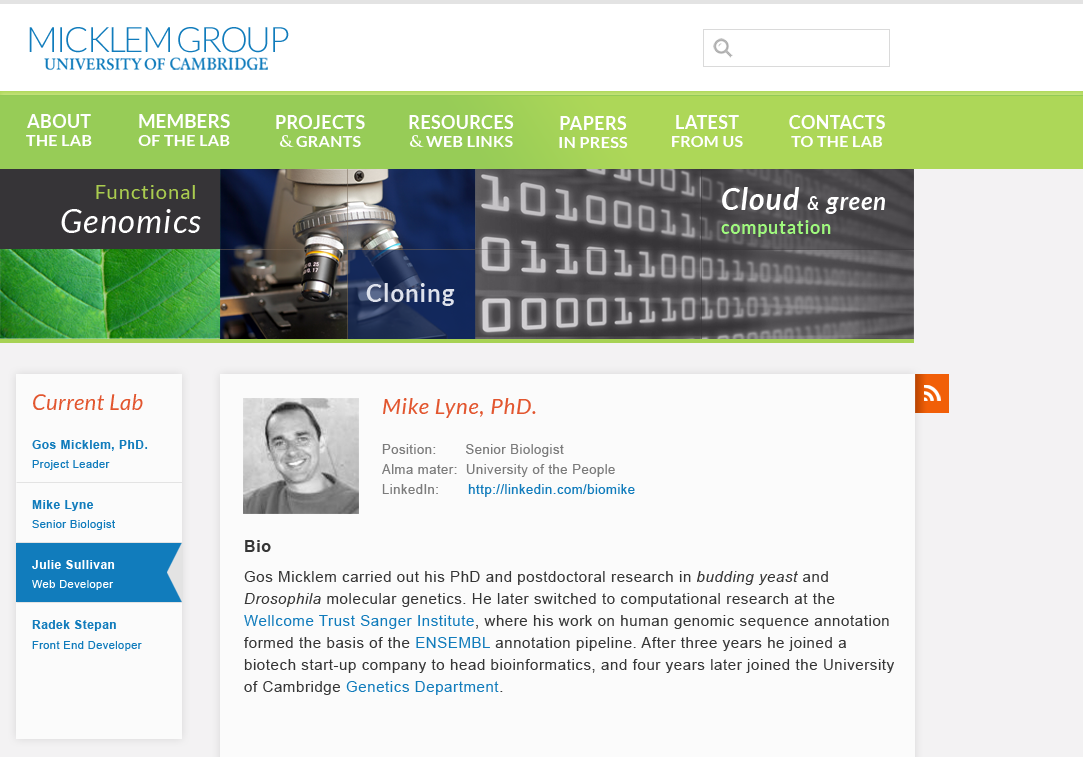
<style>
.page{position:relative;width:1083px;height:757px;background:#fbfbfb}
.page>*{position:absolute;margin:0}
.t1{font:35px "Lato-Light";letter-spacing:-0.06em;color:#117cbc;text-transform:uppercase}
.t2{font:16px/18px "Lato-Bold";letter-spacing:0.02em;color:#ffffff;text-transform:uppercase}
.t3{font:18px/18px "Lato-Bold";letter-spacing:0.02em;color:#ffffff;text-transform:uppercase}
.t4{font:18.5px/18px "Lato-Bold";letter-spacing:0.02em;color:#ffffff;text-transform:uppercase}
.t5{font:16px/18px "TrajanPro-Bold";letter-spacing:0.02em;color:#ffffff;text-transform:uppercase}
.t6{font:20.4px/33.4px "Lato-Regular";letter-spacing:0.04em;color:#aacc4f}
.t7{font:32.9px/33.4px "Lato-Italic";letter-spacing:0.04em;color:#ffffff}
.t8{font:18px/24px "Lato-Bold";letter-spacing:0.04em;color:#9ff97d}
.t9{font:30px/24px "Lato-BoldItalic";letter-spacing:0.04em;color:#ffffff}
.t10{font:18px/24px "Lato-BoldItalic";letter-spacing:0.04em;color:#ffffff}
.t11{font:24px/24px "Lato-BoldItalic";letter-spacing:0.04em;color:#ffffff}
.t12{font:24px "Lato-Bold";letter-spacing:0.04em;color:#dee2ec}
.t13{font:22px "Lato-Italic";letter-spacing:0.02em;color:#e2562f}
.t14{font:22px "Lato-Italic";letter-spacing:0.04em;color:#e2562f}
.t15{font:12px "Arial-BoldMT";letter-spacing:0.04em;color:#117cbc}
.t16{font:13px/20px "ArialMT";letter-spacing:0.04em;color:#7c7c7c}
.t17{font:13px/20px "ArialMT";letter-spacing:0.04em;color:#117cbc}
.t18{font:11px "ArialMT";letter-spacing:0.04em;color:#117cbc}
.t19{font:16px "Arial-BoldMT";letter-spacing:0.04em;color:#363636}
.t20{font:12px "Arial-BoldMT";letter-spacing:0.04em;color:#fefefe}
.t21{font:11px "ArialMT";letter-spacing:0.04em;color:#ffffff}
.t22{font:15px/22px "ArialMT";letter-spacing:0.04em;color:#363636}
.t23{font:15px/22px "Arial-ItalicMT";letter-spacing:0.04em;color:#363636}
.t24{font:15px/22px "ArialMT";letter-spacing:0.04em;color:#117cbc}
</style>
<div class="page">
<p class="t1" style="left:29px;top:27px;width:260px;height:26px">Micklem Group</p>
<p class="t2" style="left:26px;top:114px;width:66px;height:32px;text-align:center"><span class="t3">About<br></span>the Lab</p>
<p class="t2" style="left:138px;top:114px;width:92px;height:32px;text-align:center"><span class="t4">Members<br></span>of the lab</p>
<p class="t3" style="left:276px;top:115px;width:89px;height:32px;text-align:center">Projects<br><span class="t5">&amp;</span><span class="t2"> Grants</span></p>
<p class="t3" style="left:409px;top:115px;width:105px;height:32px;text-align:center">Resources<br><span class="t5">&amp;</span><span class="t2"> web links</span></p>
<p class="t2" style="left:559px;top:116px;width:69px;height:32px;text-align:center"><span class="t3">papers<br></span>in press</p>
<p class="t2" style="left:672px;top:115px;width:71px;height:32px;text-align:center"><span class="t3">Latest<br></span>from Us</p>
<p class="t2" style="left:789px;top:115px;width:96px;height:32px;text-align:center"><span class="t3">contacts<br></span>to the lab</p>
<p class="t6" style="left:61px;top:185px;width:140px;height:48px">Functional<br> <span class="t7">Genomics</span></p>
<p class="t8" style="left:721px;top:187px;width:164px;height:50px"><span class="t9">Cloud </span><span class="t10">&amp; </span><span class="t11">green<br></span>computation</p>
<p class="t12" style="left:366px;top:283px;width:89px;height:23px">Cloning</p>
<p class="t13" style="left:33px;top:394px;width:110px;height:16px">Current Lab</p>
<p class="t14" style="left:383px;top:398px;width:153px;height:20px">Mike Lyne, PhD.</p>
<p class="t15" style="left:32px;top:440px;width:116px;height:11px">Gos Micklem, PhD.</p>
<p class="t16" style="left:382px;top:444px;width:253px;height:53px">Position:       Senior Biologist<br>Alma mater:  University of the People<br>LinkedIn:       <span class="t17">http://linkedin.com/biomike</span></p>
<p class="t18" style="left:32px;top:460px;width:78px;height:10px">Project Leader</p>
<p class="t15" style="left:32px;top:500px;width:62px;height:11px">Mike Lyne</p>
<p class="t18" style="left:32px;top:520px;width:83px;height:10px">Senior Biologist</p>
<p class="t19" style="left:245px;top:540px;width:26px;height:12px">Bio</p>
<p class="t20" style="left:32px;top:560px;width:83px;height:9px">Julie Sullivan</p>
<p class="t21" style="left:32px;top:580px;width:82px;height:10px">Web Developer</p>
<p class="t22" style="left:244px;top:571px;width:650px;height:124px">Gos Micklem carried out his PhD and postdoctoral research in <span class="t23">budding yeast</span> and<br><span class="t23">Drosophila </span>molecular genetics. He later switched to computational research at the<br><span class="t24">Wellcome Trust Sanger Institute</span>, where his work on human genomic sequence annotation<br>formed the basis of the <span class="t24">ENSEMBL </span>annotation pipeline. After three years he joined a<br>biotech start-up company to head bioinformatics, and four years later joined the University<br>of Cambridge <span class="t24">Genetics Department</span>.</p>
<p class="t15" style="left:32px;top:620px;width:84px;height:11px">Radek Stepan</p>
<p class="t18" style="left:32px;top:641px;width:110px;height:10px">Front End Developer</p>
</div>
